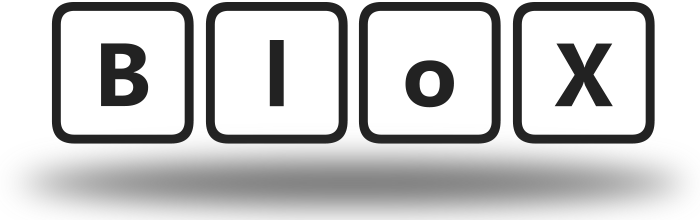
<style>
.page{position:relative;width:700px;height:220px;background:#ffffff}
.page>*{position:absolute;margin:0}
.t1{font:122px "SegoeKeycaps";color:#222222}
</style>
<div class="page">
<p class="t1" style="left:51px;top:2px;width:604px;height:142px">BloX</p>
</div>
